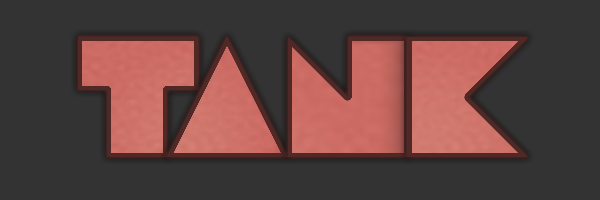
<style>
.page{position:relative;width:600px;height:200px;background:#333333}
.page>*{position:absolute;margin:0}
.t1{font:200px "DiscoDeck";color:#cd6d65}
.t2{font:200px "DiscoDeck";color:#cd6f67}
.t3{font:200px "DiscoDeck";color:#cb6a62}
.t4{font:200px "DiscoDeck";color:#ce7168}
</style>
<div class="page">
<p class="t1" style="left:78px;top:36px;width:121px;height:121px">T</p>
<p class="t2" style="left:167px;top:36px;width:121px;height:121px">A</p>
<p class="t3" style="left:288px;top:36px;width:120px;height:121px">N</p>
<p class="t4" style="left:408px;top:37px;width:121px;height:120px">K</p>
</div>
